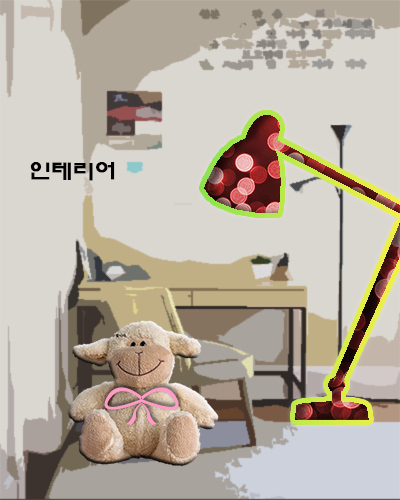
<style>
.page{position:relative;width:400px;height:500px;background:#dad6d0}
.page>*{position:absolute;margin:0}
.t1{font:21px "ExpoM-HM";color:#000000;font-weight:bold}
</style>
<div class="page">
<p class="t1" style="left:30px;top:162px;width:85px;height:19px">인테리어</p>
</div>
